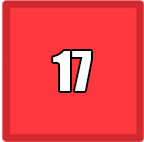
<style>
.page{position:relative;width:144px;height:142px;background:#ff3840}
.page>*{position:absolute;margin:0}
.t1{font:50px "Impact";color:#ffffff}
</style>
<div class="page">
<p class="t1" style="left:53px;top:51px;width:38px;height:40px">17</p>
</div>
